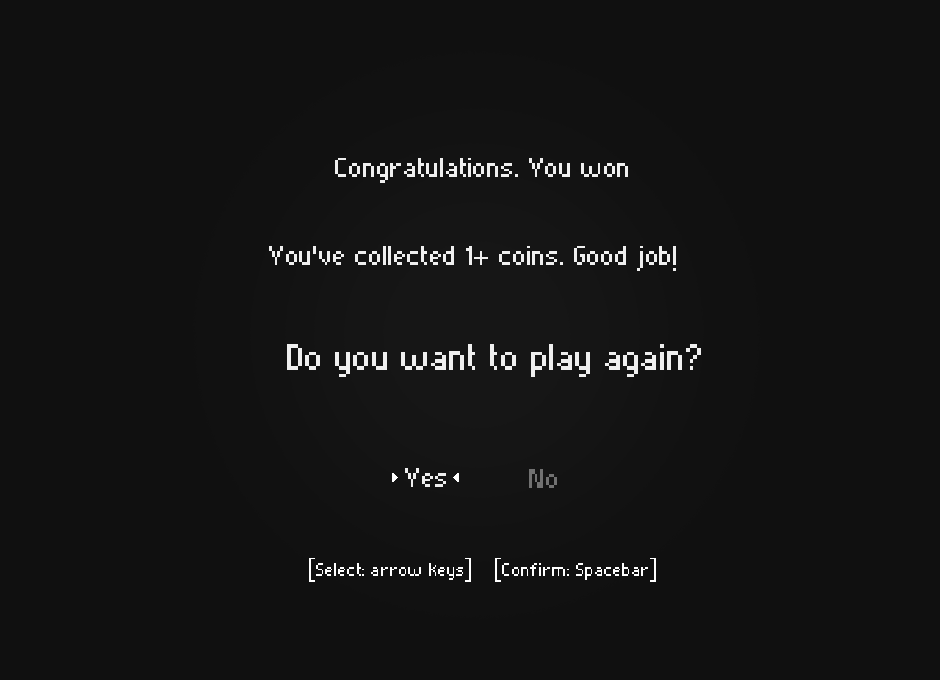
<style>
.page{position:relative;width:940px;height:680px;background:#101010}
.page>*{position:absolute;margin:0}
.t1{font:36px "Pixelade";color:#efefef}
.t2{font:48px "Pixelade";color:#efefef}
.t3{font:36px "Pixelade";color:#717171}
.t4{font:24px "Pixelade";color:#ffffff}
</style>
<div class="page">
<p class="t1" style="left:335px;top:158px;width:293px;height:25px">Congratulations. You won</p>
<p class="t1" style="left:269px;top:246px;width:407px;height:25px">You've collected 1+ coins. Good job!</p>
<p class="t2" style="left:287px;top:344px;width:414px;height:33px">Do you want to play again?</p>
<p class="t1" style="left:405px;top:468px;width:41px;height:19px">Yes</p>
<p class="t3" style="left:529px;top:469px;width:28px;height:19px">No</p>
<p class="t4" style="left:309px;top:558px;width:347px;height:24px">[Select: arrow keys]    [Confirm: Spacebar]</p>
</div>
